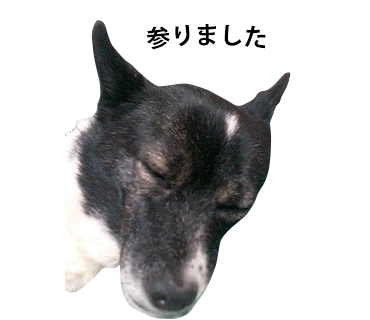
<style>
.page{position:relative;width:370px;height:320px;background:#ffffff}
.page>*{position:absolute;margin:0}
.t1{font:24px "KozGoPr6N-Bold";color:#000000}
</style>
<div class="page">
<p class="t1" style="left:147px;top:24px;width:119px;height:26px">参りました</p>
</div>
